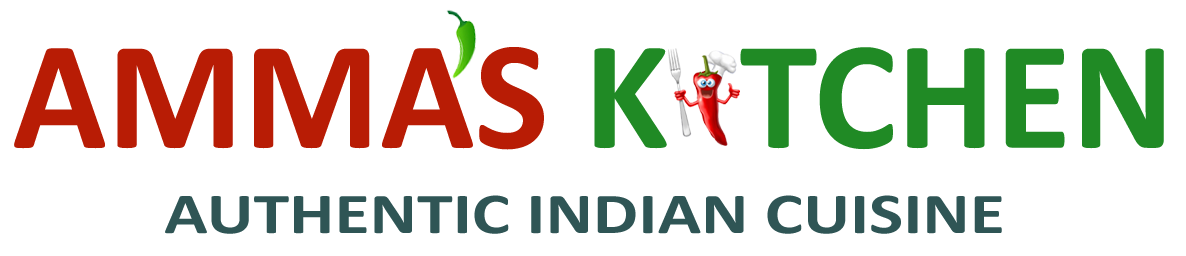
<style>
.page{position:relative;width:1186px;height:256px;background:#ffffff}
.page>*{position:absolute;margin:0}
.t1{font:156.3px "Calibri-Bold";color:#208a25}
.t2{font:156.3px "Calibri-Bold";color:#b81c05}
.t3{font:58.2px "Calibri-Bold";color:#2f5555;scale:1.24 1}
</style>
<div class="page">
<p class="t1" style="left:14px;top:47px;width:1150px;height:103px"><span class="t2">AMMAS </span>K  TCHEN</p>
<p class="t3" style="left:165px;top:195px;width:837px;height:39px">AUTHENTIC INDIAN CUISINE</p>
</div>
